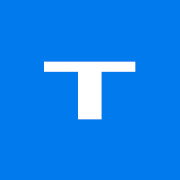
<style>
.page{position:relative;width:180px;height:180px;background:#007aed}
.page>*{position:absolute;margin:0}
.t1{font:80px "Arial-BoldMT";letter-spacing:-0.03em;color:#ffffff;scale:2 1}
</style>
<div class="page">
<p class="t1" style="left:44px;top:61px;width:92px;height:59px">T</p>
</div>
